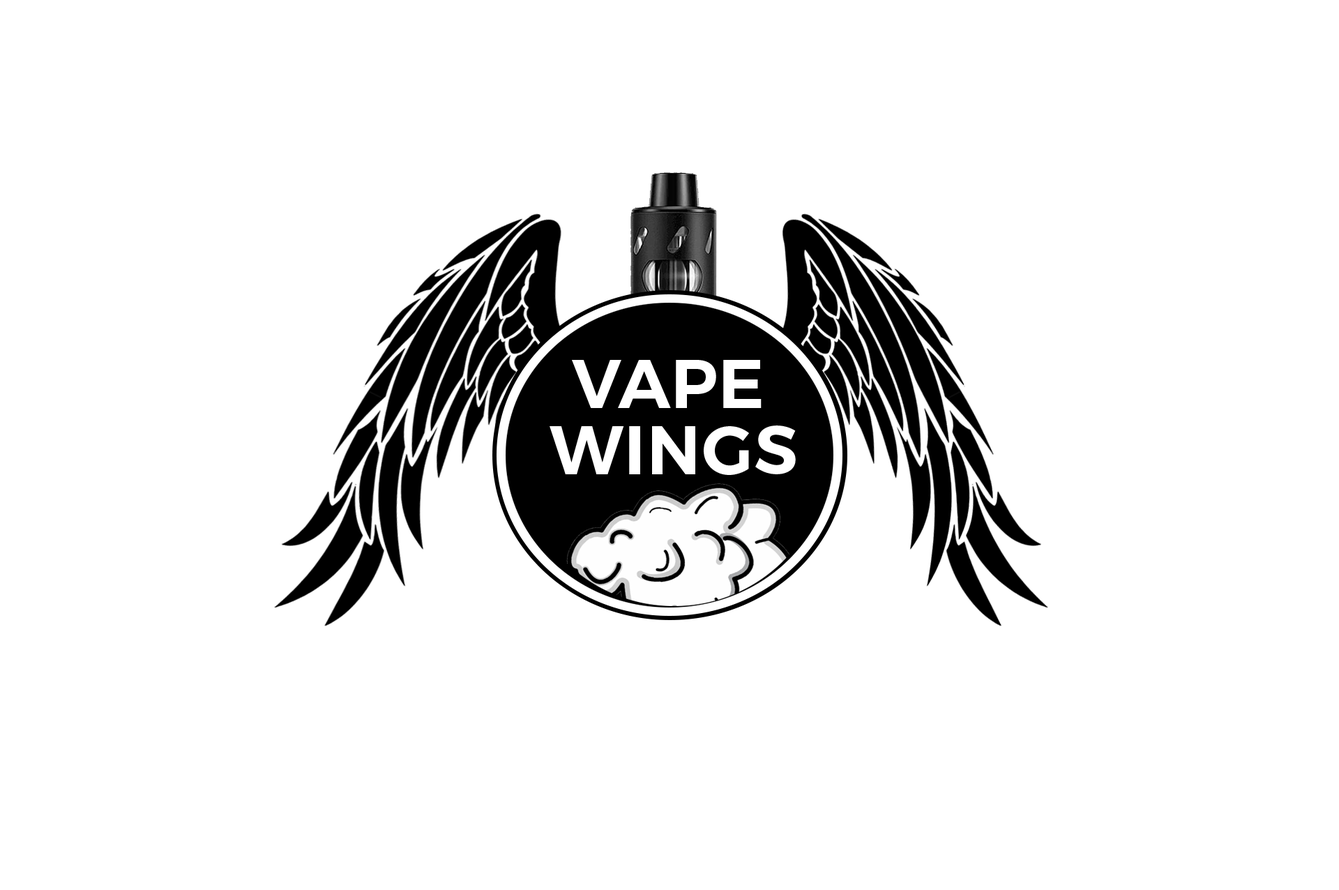
<style>
.page{position:relative;width:1339px;height:890px;background:#ffffff}
.page>*{position:absolute;margin:0}
.t1{font:69.1px "Montserrat-SemiBold";color:#ffffff;text-transform:uppercase}
</style>
<div class="page">
<p class="t1" style="left:572px;top:360px;width:190px;height:48px">vape</p>
<p class="t1" style="left:550px;top:426px;width:246px;height:49px">wings</p>
</div>
